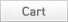
<style>
.page{position:relative;width:68px;height:22px}
.page>*{position:absolute;margin:0}
.t1{font:12px "HCRDotum-Bold";color:#707070}
</style>
<div class="page">
<p class="t1" style="left:22px;top:6px;width:24px;height:10px">Cart</p>
</div>
